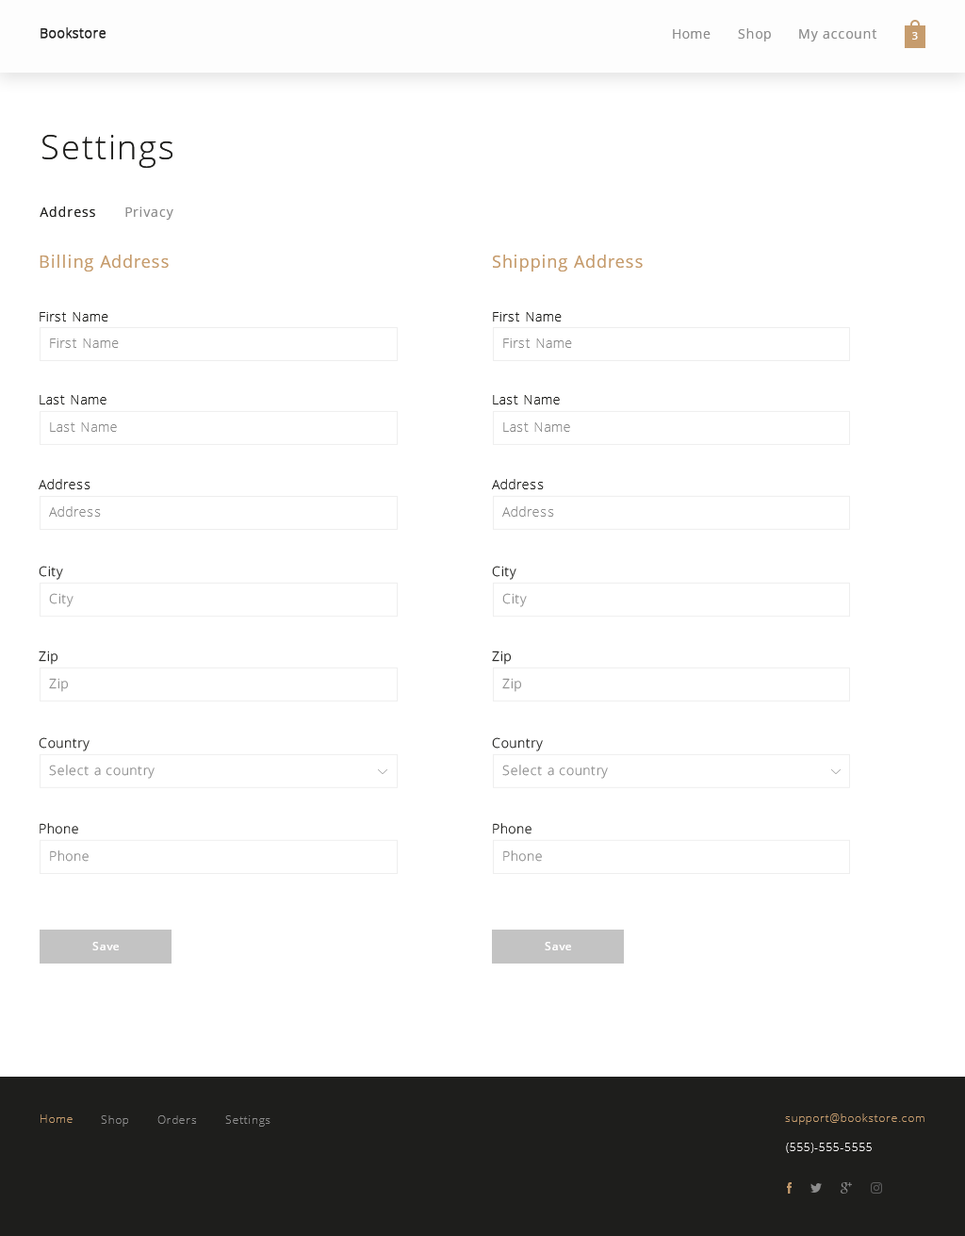
<style>
.page{position:relative;width:965px;height:1236px;background:#ffffff}
.page>*{position:absolute;margin:0}
.t1{font:33.9px "OpenSans-Light";letter-spacing:0.05em;color:#1e1e1c}
.t2{font:13.2px "OpenSans";letter-spacing:0.05em;color:#1e1e1c}
.t3{font:13.2px "OpenSans";letter-spacing:0.05em;color:#8c8c8c}
.t4{font:17px "OpenSans";letter-spacing:0.05em;color:#c69c6d}
.t5{font:13.2px "OpenSans-Light";letter-spacing:0.05em;color:#1e1e1c}
.t6{font:13.2px "OpenSans-Light";letter-spacing:0.05em;color:#8c8c8c}
.t7{font:13.3px "OpenSans-Light";letter-spacing:0.05em}
.t8{font:13.3px "OpenSans-Light";letter-spacing:0.05em;color:#8c8c8c}
.t9{font:13.3px "OpenSans-Light";letter-spacing:0.05em;color:#1e1e1c}
.t10{font:11.3px "OpenSans-Semibold";letter-spacing:0.05em;color:#fffefe}
</style>
<div class="page">
<p class="t1" style="left:42px;top:135px;width:130px;height:33px">Settings</p>
<p class="t2" style="left:40px;top:206px;width:55px;height:11px">Address</p>
<p class="t3" style="left:125px;top:206px;width:48px;height:14px">Privacy</p>
<p class="t4" style="left:40px;top:254px;width:129px;height:17px">Billing Address</p>
<p class="t4" style="left:493px;top:254px;width:150px;height:17px">Shipping Address</p>
<p class="t5" style="left:40px;top:312px;width:68px;height:9px">First Name</p>
<p class="t5" style="left:493px;top:312px;width:69px;height:9px">First Name</p>
<p class="t6" style="left:50px;top:338px;width:69px;height:10px">First Name</p>
<p class="t6" style="left:503px;top:338px;width:69px;height:10px">First Name</p>
<p class="t5" style="left:40px;top:395px;width:66px;height:9px">Last Name</p>
<p class="t5" style="left:493px;top:395px;width:67px;height:9px">Last Name</p>
<p class="t6" style="left:50px;top:422px;width:67px;height:10px">Last Name</p>
<p class="t6" style="left:503px;top:422px;width:67px;height:10px">Last Name</p>
<p class="t5" style="left:39px;top:479px;width:51px;height:10px">Address</p>
<p class="t5" style="left:492px;top:479px;width:52px;height:10px">Address</p>
<p class="t6" style="left:49px;top:506px;width:52px;height:10px">Address</p>
<p class="t6" style="left:502px;top:506px;width:52px;height:10px">Address</p>
<p class="t7" style="left:39px;top:565px;width:24px;height:15px">City</p>
<p class="t7" style="left:492px;top:565px;width:24px;height:15px">City</p>
<p class="t8" style="left:49px;top:593px;width:25px;height:14px">City</p>
<p class="t8" style="left:502px;top:593px;width:25px;height:14px">City</p>
<p class="t9" style="left:39px;top:650px;width:18px;height:14px">Zip</p>
<p class="t9" style="left:492px;top:650px;width:19px;height:14px">Zip</p>
<p class="t8" style="left:49px;top:678px;width:19px;height:14px">Zip</p>
<p class="t8" style="left:502px;top:678px;width:19px;height:14px">Zip</p>
<p class="t7" style="left:39px;top:737px;width:51px;height:14px">Country</p>
<p class="t7" style="left:492px;top:737px;width:51px;height:14px">Country</p>
<p class="t8" style="left:49px;top:764px;width:106px;height:14px">Select a country</p>
<p class="t8" style="left:502px;top:764px;width:106px;height:14px">Select a country</p>
<p class="t7" style="left:40px;top:823px;width:38px;height:11px">Phone</p>
<p class="t7" style="left:493px;top:823px;width:39px;height:11px">Phone</p>
<p class="t8" style="left:50px;top:850px;width:39px;height:11px">Phone</p>
<p class="t8" style="left:503px;top:850px;width:39px;height:11px">Phone</p>
<p class="t10" style="left:92px;top:942px;width:27px;height:8px">Save</p>
<p class="t10" style="left:545px;top:942px;width:26px;height:8px">Save</p>
</div>
